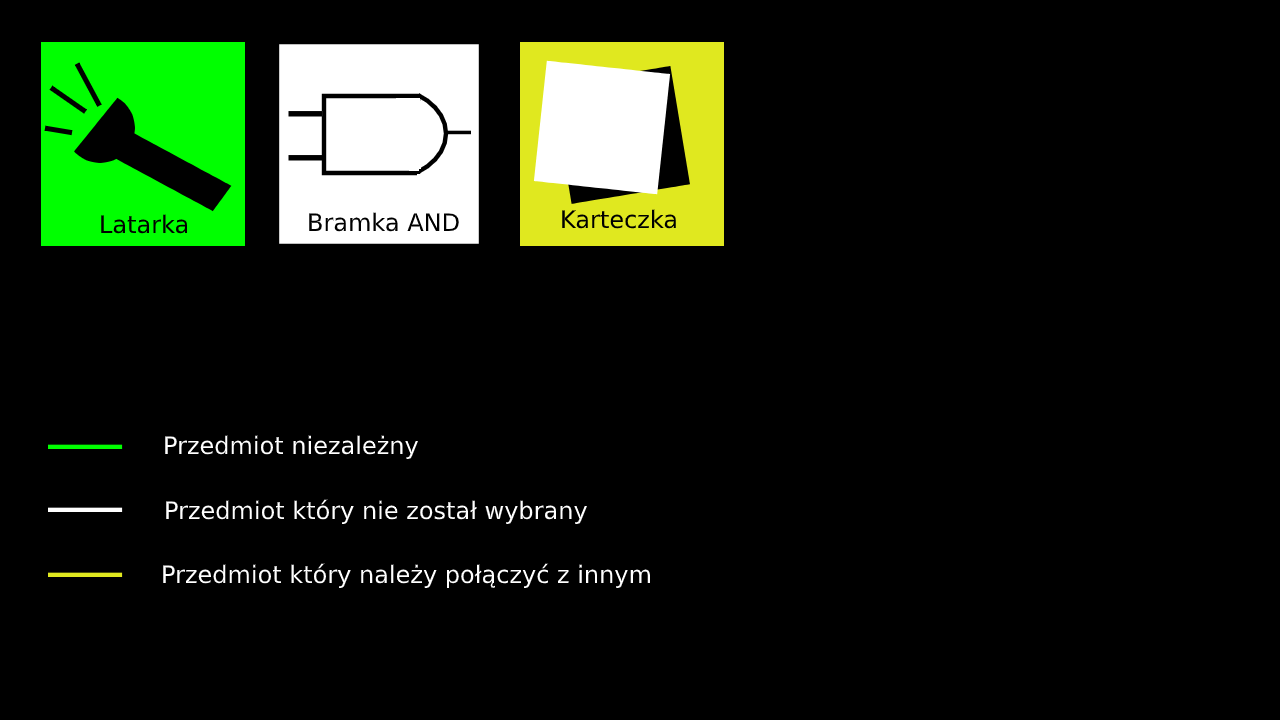
<style>
.page{position:relative;width:1280px;height:720px;background:#000000}
.page>*{position:absolute;margin:0}
.t1{font:24px "DejaVuSans";color:#000000}
.t2{font:24px "DejaVuSans";color:#ffffff}
</style>
<div class="page">
<p class="t1" style="left:562px;top:209px;width:114px;height:20px">Karteczka</p>
<p class="t1" style="left:101px;top:214px;width:87px;height:20px">Latarka</p>
<p class="t1" style="left:309px;top:212px;width:150px;height:20px">Bramka AND</p>
<p class="t2" style="left:165px;top:435px;width:253px;height:24px">Przedmiot niezależny</p>
<p class="t2" style="left:166px;top:499px;width:421px;height:25px">Przedmiot który nie został wybrany</p>
<p class="t2" style="left:163px;top:563px;width:487px;height:25px">Przedmiot który należy połączyć z innym</p>
</div>
